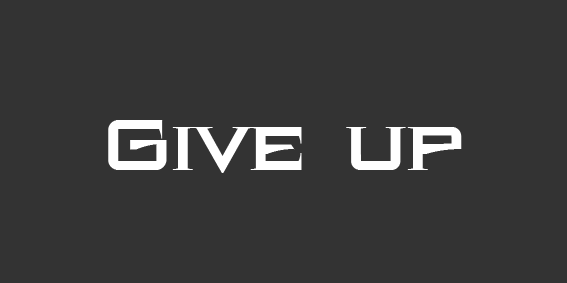
<style>
.page{position:relative;width:567px;height:283px;background:#333333}
.page>*{position:absolute;margin:0}
.t1{font:100px "BlackHoleBB";color:#ffffff}
</style>
<div class="page">
<p class="t1" style="left:108px;top:120px;width:354px;height:53px">Give up</p>
</div>
